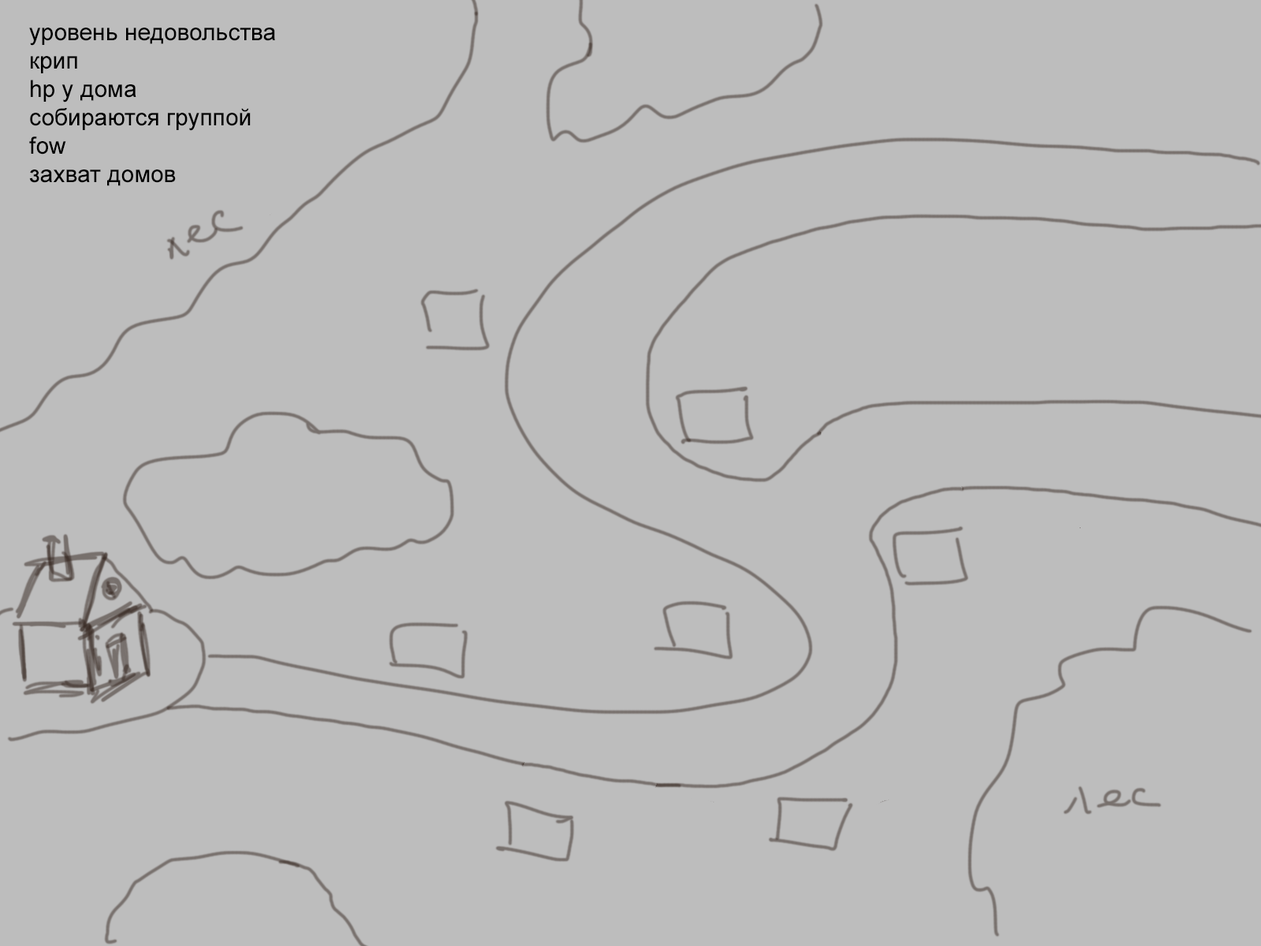
<style>
.page{position:relative;width:1261px;height:946px;background:#bdbdbd}
.page>*{position:absolute;margin:0}
.t1{font:23.6px "ArialMT";color:#000000}
</style>
<div class="page">
<p class="t1" style="left:29px;top:28px;width:246px;height:158px">уровень недовольства<br>крип<br>hp у дома<br>собираются группой<br>fow<br>захват домов</p>
</div>
